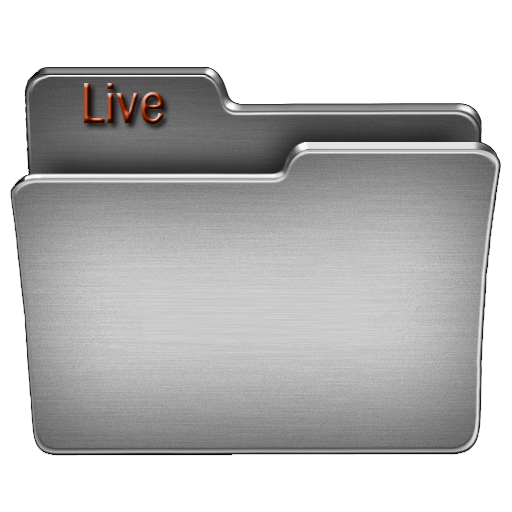
<style>
.page{position:relative;width:512px;height:512px;background:#ffffff}
.page>*{position:absolute;margin:0}
.t1{font:60px "FranklinGothic-MediumCond"}
</style>
<div class="page">
<p class="t1" style="left:83px;top:83px;width:82px;height:41px">Live</p>
</div>
